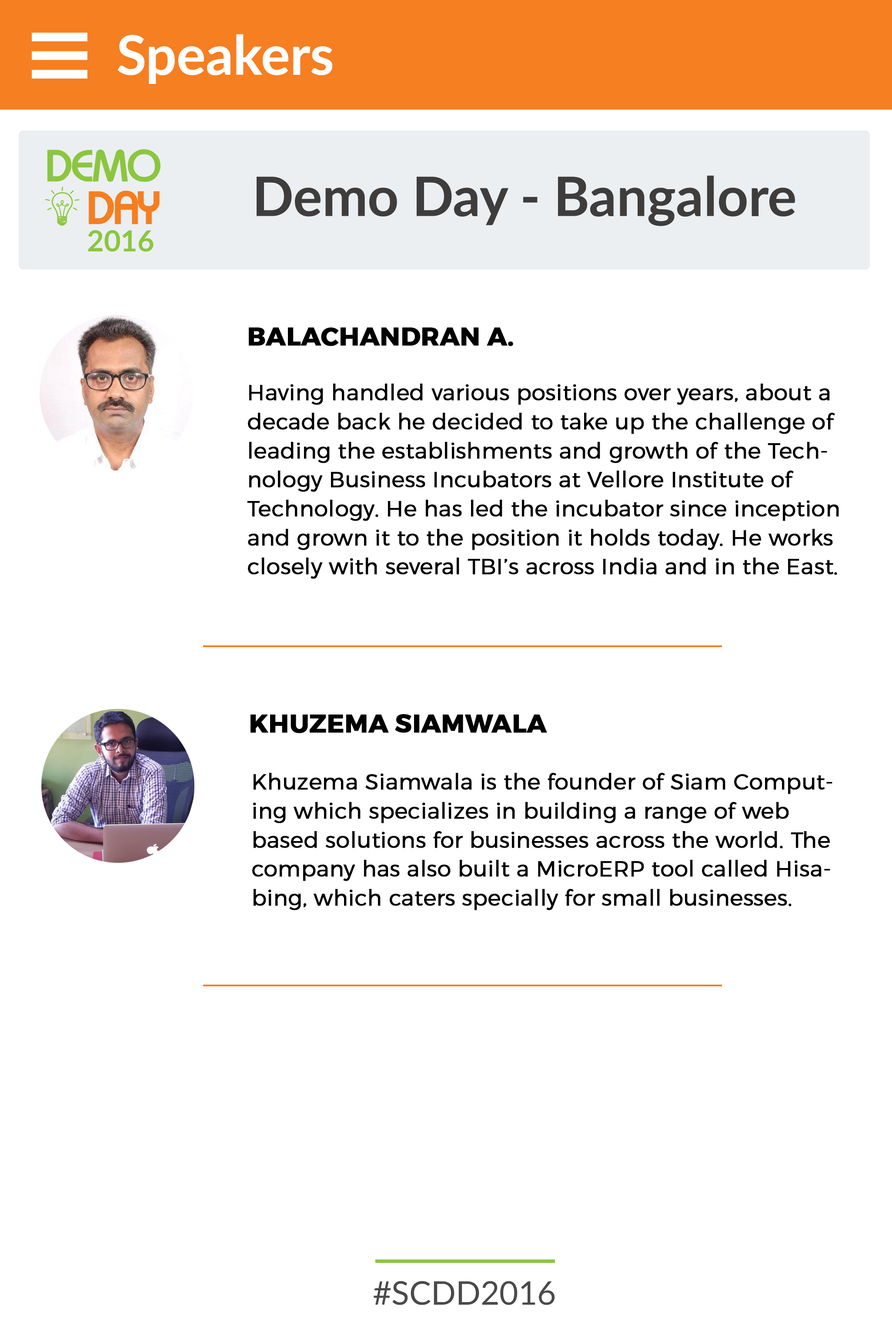
<style>
.page{position:relative;width:892px;height:1336px;background:#ffffff}
.page>*{position:absolute;margin:0}
.t1{font:54.4px "Lato-Bold";color:#ffffff}
.t2{font:54.4px "Lato-Bold";color:#3e3d3c}
.t3{font:21.8px/29px "Montserrat-Light";color:#000000;font-weight:bold}
.t4{font:25.4px "Montserrat-Bold";color:#000000;text-transform:uppercase;font-weight:bold}
.t5{font:25.4px "Montserrat-Bold";color:#000000;font-weight:bold}
.t6{font:21.8px "Montserrat-Regular";color:#000000;font-weight:bold}
.t7{font:32.6px "Lato-Regular";color:#4a4b49}
</style>
<div class="page">
<p class="t1" style="left:117px;top:34px;width:215px;height:50px">Speakers</p>
<p class="t2" style="left:257px;top:175px;width:538px;height:51px">Demo Day - Bangalore</p>
<p class="t3" style="left:247px;top:328px;width:592px;height:251px"><span class="t4">Balachandran</span><span class="t5"> A.<br></span><span class="t6"><br></span>Having handled various positions over years, about a decade back he decided to take up the challenge of leading the establishments and growth of the Technology Business Incubators at Vellore Institute of Technology. He has led the incubator since inception and grown it to the position it holds today. He works closely with several TBI’s across India and in the East.</p>
<p class="t4" style="left:251px;top:714px;width:296px;height:19px">Khuzema Siamwala</p>
<p class="t3" style="left:252px;top:773px;width:581px;height:138px"><span class="t4"><br><br></span>Khuzema Siamwala is the founder of Siam Computing which specializes in building a range of web based solutions for businesses across the world. The company has also built a MicroERP tool called Hisabing, which caters specially for small businesses.</p>
<p class="t7" style="left:374px;top:1281px;width:181px;height:25px">#SCDD2016</p>
</div>
